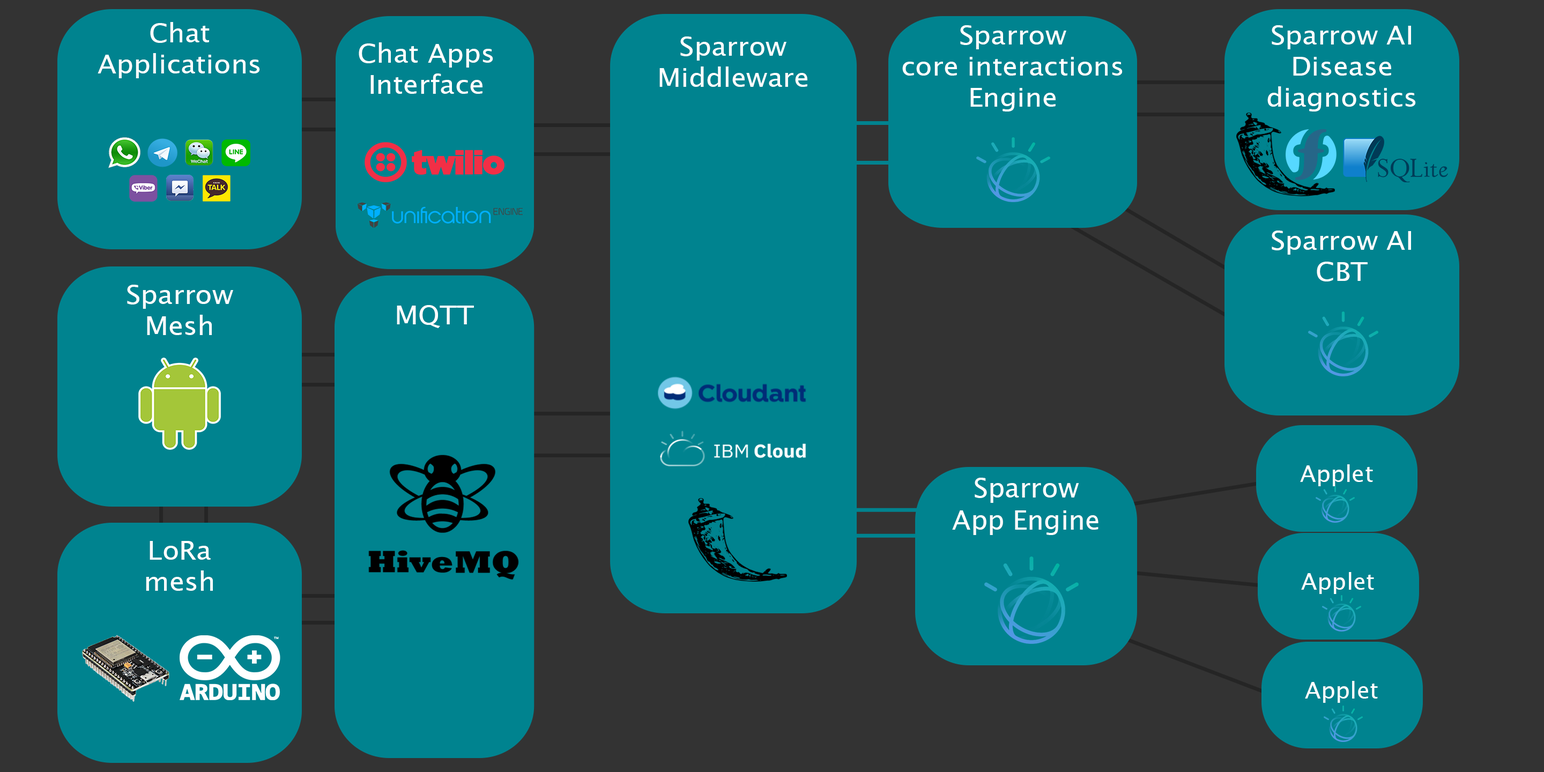
<style>
.page{position:relative;width:1544px;height:772px;background:#00838f}
.page>*{position:absolute;margin:0}
.t1{font:26px "LucidaSansUnicode";color:#ffffff;scale:1.05 1}
.t2{font:23.2px "LucidaSansUnicode";color:#ffffff}
.t3{font:26.8px "LucidaSansUnicode";color:#ffffff}
</style>
<div class="page">
<p class="t1" style="left:98px;top:22px;width:162px;height:56px;text-align:center">Chat <br>Applications</p>
<p class="t1" style="left:902px;top:25px;width:221px;height:87px;text-align:center">Sparrow<br>core interactions<br>Engine</p>
<p class="t1" style="left:1268px;top:25px;width:148px;height:87px;text-align:center">Sparrow AI<br>Disease <br>diagnostics</p>
<p class="t1" style="left:660px;top:36px;width:148px;height:51px;text-align:center">Sparrow <br>Middleware</p>
<p class="t1" style="left:359px;top:42px;width:134px;height:52px;text-align:center">Chat Apps<br>Interface</p>
<p class="t1" style="left:1272px;top:231px;width:139px;height:51px;text-align:center">Sparrow AI<br>CBT</p>
<p class="t1" style="left:127px;top:285px;width:106px;height:50px;text-align:center">Sparrow <br>Mesh</p>
<p class="t1" style="left:397px;top:305px;width:77px;height:23px">MQTT</p>
<p class="t2" style="left:1300px;top:464px;width:73px;height:22px">Applet</p>
<p class="t3" style="left:952px;top:478px;width:147px;height:57px;text-align:center">Sparrow<br>App Engine</p>
<p class="t1" style="left:146px;top:541px;width:67px;height:50px;text-align:center">LoRa <br>mesh</p>
<p class="t2" style="left:1301px;top:572px;width:73px;height:22px">Applet</p>
<p class="t2" style="left:1305px;top:681px;width:73px;height:22px">Applet</p>
</div>
